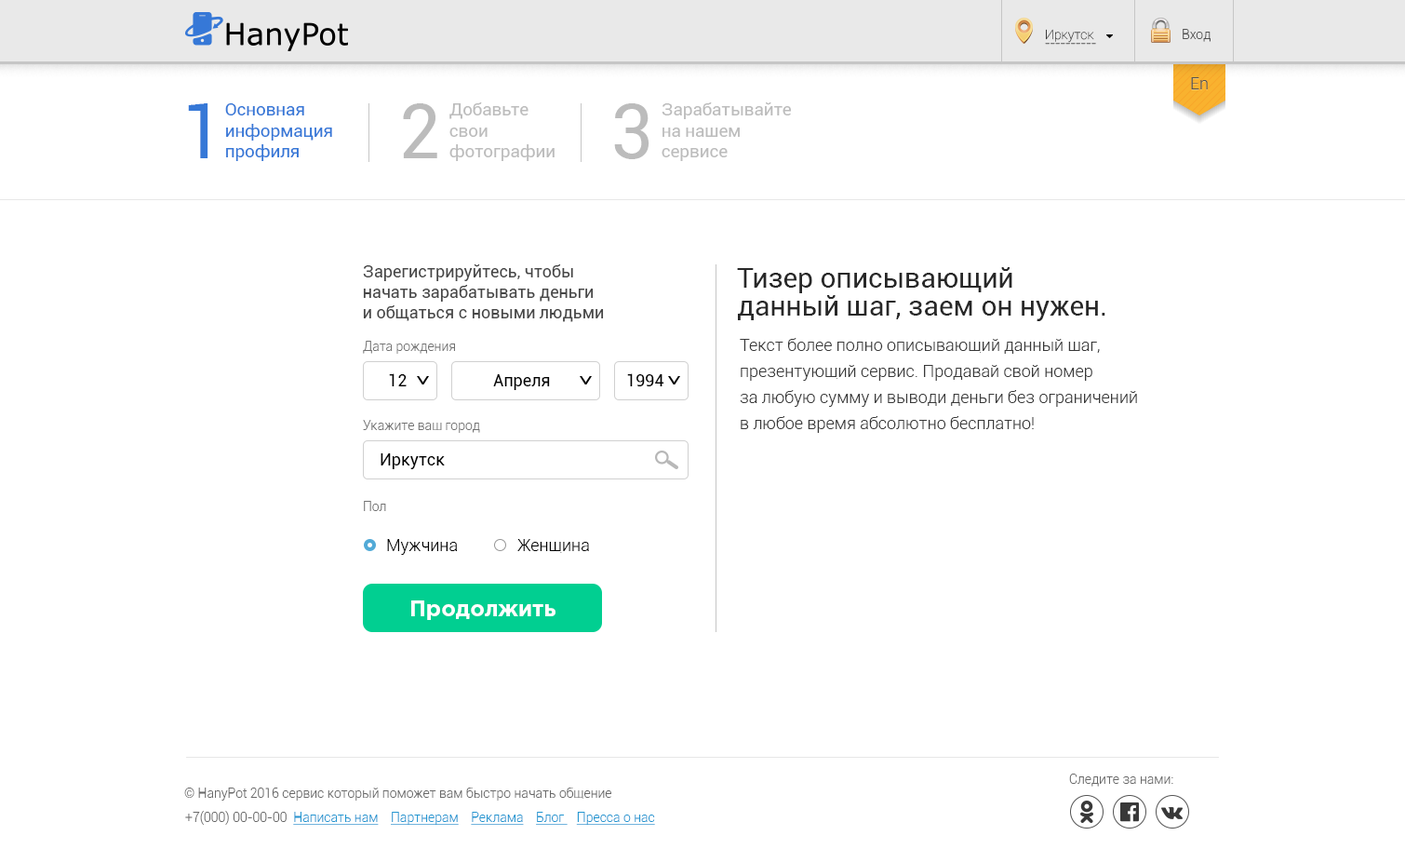
<style>
.page{position:relative;width:1405px;height:849px;background:#ffffff}
.page>*{position:absolute;margin:0}
.t1{font:13px/8.4px "Roboto-Thin";color:#393939}
.t2{font:13px "Roboto-Light";color:#525252}
.t3{font:16.7px "Roboto-Light";color:#525252}
.t4{font:74.9px "Roboto-Regular";color:#3678d7}
.t5{font:17.4px "Roboto-Regular";color:#3678d7}
.t6{font:74.9px "Roboto-Regular";color:#bcbcbc}
.t7{font:17.4px "Roboto-Regular";color:#bcbcbc}
.t8{font:16.7px "Roboto-Regular";color:#464646}
.t9{font:27.9px/27.9px "Roboto-Regular";color:#282828}
.t10{font:13px "Roboto-Light";color:#727272}
.t11{font:16.7px/26.1px "Roboto-Light";color:#393939}
.t12{font:16.7px "Roboto-Regular";color:#000000}
.t13{font:16.7px "Roboto-Light";color:#000000}
.t14{font:22.3px "GothamPro-Bold";color:#ffffff}
.t15{font:13px "Roboto-Light";color:#696969}
.t16{font:13px "Roboto-Light";color:#2196d1;text-decoration:underline}
</style>
<div class="page">
<p class="t1" style="left:1045px;top:29px;width:51px;height:16px">Иркутск<br>----------</p>
<p class="t2" style="left:1183px;top:29px;width:28px;height:13px">Вход</p>
<p class="t3" style="left:1191px;top:77px;width:17px;height:12px">En</p>
<p class="t4" style="left:188px;top:103px;width:20px;height:55px">1</p>
<p class="t5" style="left:225px;top:103px;width:107px;height:58px">Основная <br>информация <br>профиля</p>
<p class="t6" style="left:403px;top:103px;width:34px;height:55px">2</p>
<p class="t7" style="left:449px;top:102px;width:106px;height:59px">Добавьте<br>свои<br>фотографии</p>
<p class="t6" style="left:614px;top:103px;width:36px;height:56px">3</p>
<p class="t7" style="left:662px;top:102px;width:130px;height:59px">Зарабатывайте<br>на нашем <br>сервисе</p>
<p class="t8" style="left:363px;top:264px;width:241px;height:58px">Зарегистрируйтесь, чтобы <br>начать зарабатывать деньги<br>и общаться с новыми людьми</p>
<p class="t9" style="left:737px;top:267px;width:368px;height:54px">Тизер описывающий<br>данный шаг, заем он нужен.</p>
<p class="t10" style="left:363px;top:341px;width:92px;height:13px">Дата рождения</p>
<p class="t11" style="left:740px;top:338px;width:397px;height:95px">Текст более полно описывающий данный шаг, <br>презентующий сервис. Продавай свой номер <br>за любую сумму и выводи деньги без ограничений <br>в любое время абсолютно бесплатно!</p>
<p class="t12" style="left:389px;top:373px;width:18px;height:13px">12</p>
<p class="t12" style="left:493px;top:374px;width:57px;height:16px">Апреля</p>
<p class="t12" style="left:627px;top:373px;width:37px;height:13px">1994</p>
<p class="t10" style="left:363px;top:420px;width:117px;height:13px">Укажите ваш город</p>
<p class="t12" style="left:381px;top:453px;width:64px;height:16px">Иркутск</p>
<p class="t10" style="left:364px;top:501px;width:22px;height:10px">Пол</p>
<p class="t13" style="left:387px;top:539px;width:71px;height:16px">Мужчина</p>
<p class="t13" style="left:517px;top:539px;width:72px;height:14px">Женщина</p>
<p class="t14" style="left:411px;top:600px;width:145px;height:20px">Продолжить</p>
<p class="t15" style="left:1069px;top:773px;width:104px;height:13px">Следите за нами:</p>
<p class="t15" style="left:184px;top:787px;width:427px;height:13px">© HanyPot 2016 сервис который поможет вам быстро начать общение</p>
<p class="t16" style="left:185px;top:810px;width:470px;height:14px"><span class="t15">+7(000) 00-00-00  </span>Написать нам    Партнерам    Реклама    Блог    Пресса о нас</p>
</div>
